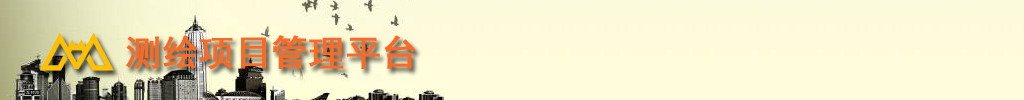
<style>
.page{position:relative;width:1024px;height:100px;background:#fffddc}
.page>*{position:absolute;margin:0}
.t1{font:36px "SimHei";color:#fa6a27;font-weight:bold}
</style>
<div class="page">
<p class="t1" style="left:126px;top:35px;width:290px;height:35px">测绘项目管理平台</p>
</div>
